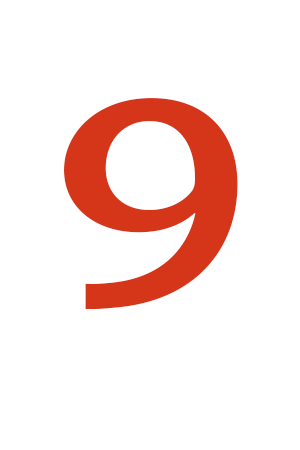
<style>
.page{position:relative;width:300px;height:450px;background:#ffffff}
.page>*{position:absolute;margin:0}
.t1{font:271.8px "AdobeFanHeitiStd-Bold";color:#d53518;scale:1.32 1}
</style>
<div class="page">
<p class="t1" style="left:64px;top:98px;width:174px;height:212px">9</p>
</div>
